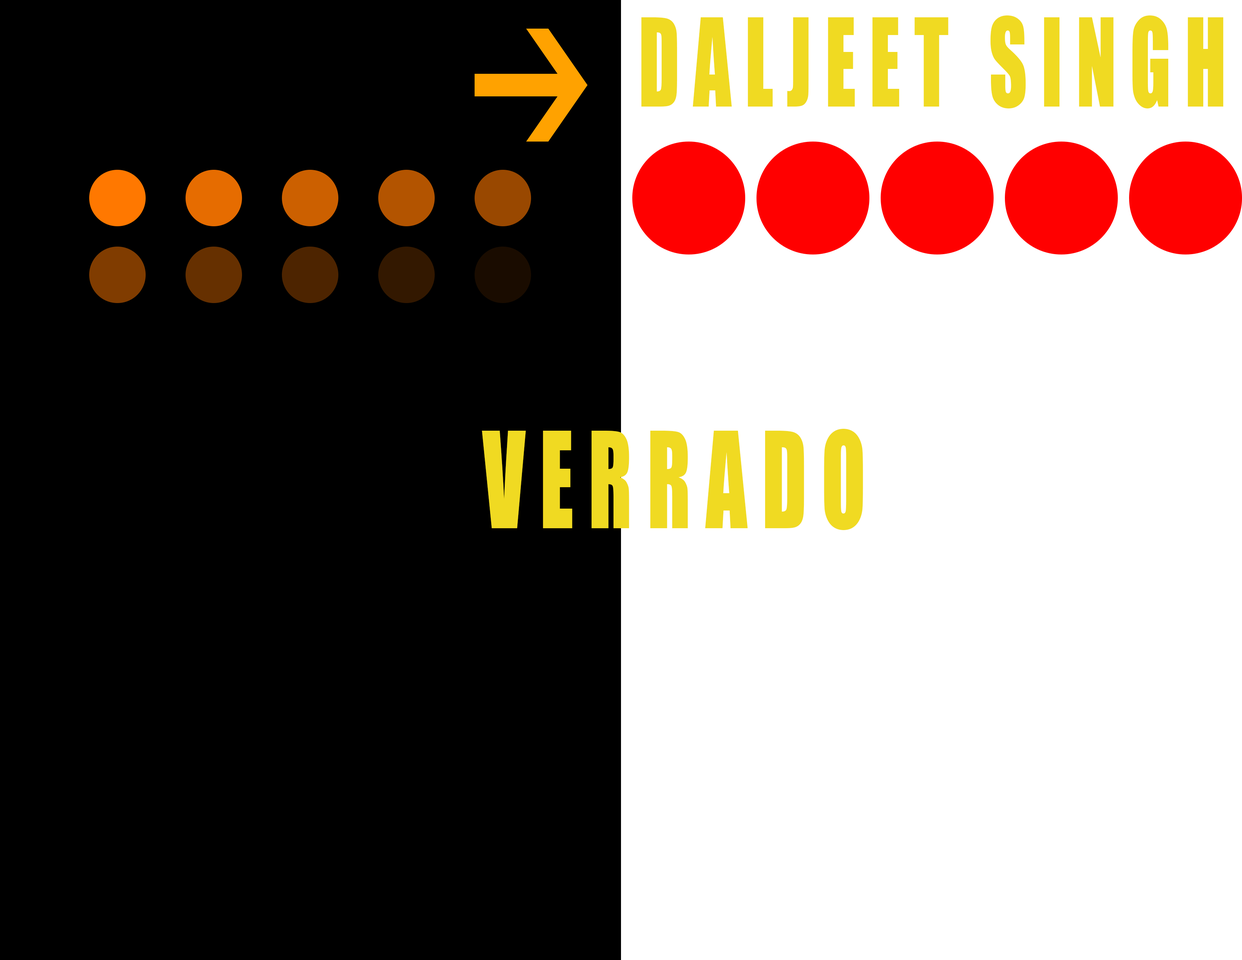
<style>
.page{position:relative;width:1242px;height:960px;background:#000000}
.page>*{position:absolute;margin:0}
.t1{font:113.1px "Impact";letter-spacing:0.18em;color:#f0da22;text-transform:uppercase;scale:0.66 1}
.t2{font:123.2px "Impact";letter-spacing:0.18em;color:#f0da22;text-transform:uppercase;scale:0.66 1}
</style>
<div class="page">
<p class="t1" style="left:641px;top:15px;width:583px;height:93px">Daljeet Singh</p>
<p class="t2" style="left:482px;top:429px;width:381px;height:101px">Verrado</p>
</div>
